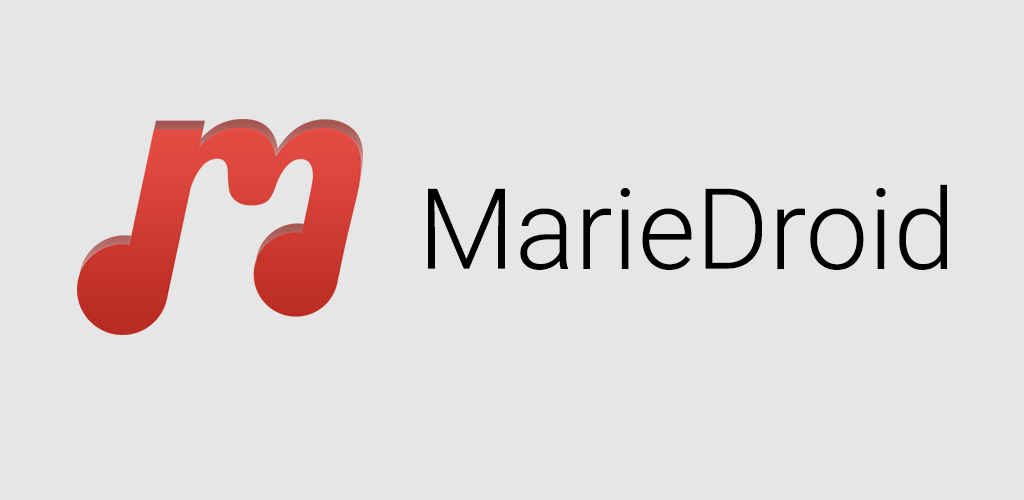
<style>
.page{position:relative;width:1024px;height:500px;background:#e6e6e6}
.page>*{position:absolute;margin:0}
.t1{font:112px "Roboto-Light";color:#000000}
</style>
<div class="page">
<p class="t1" style="left:428px;top:184px;width:519px;height:86px">MarieDroid</p>
</div>
